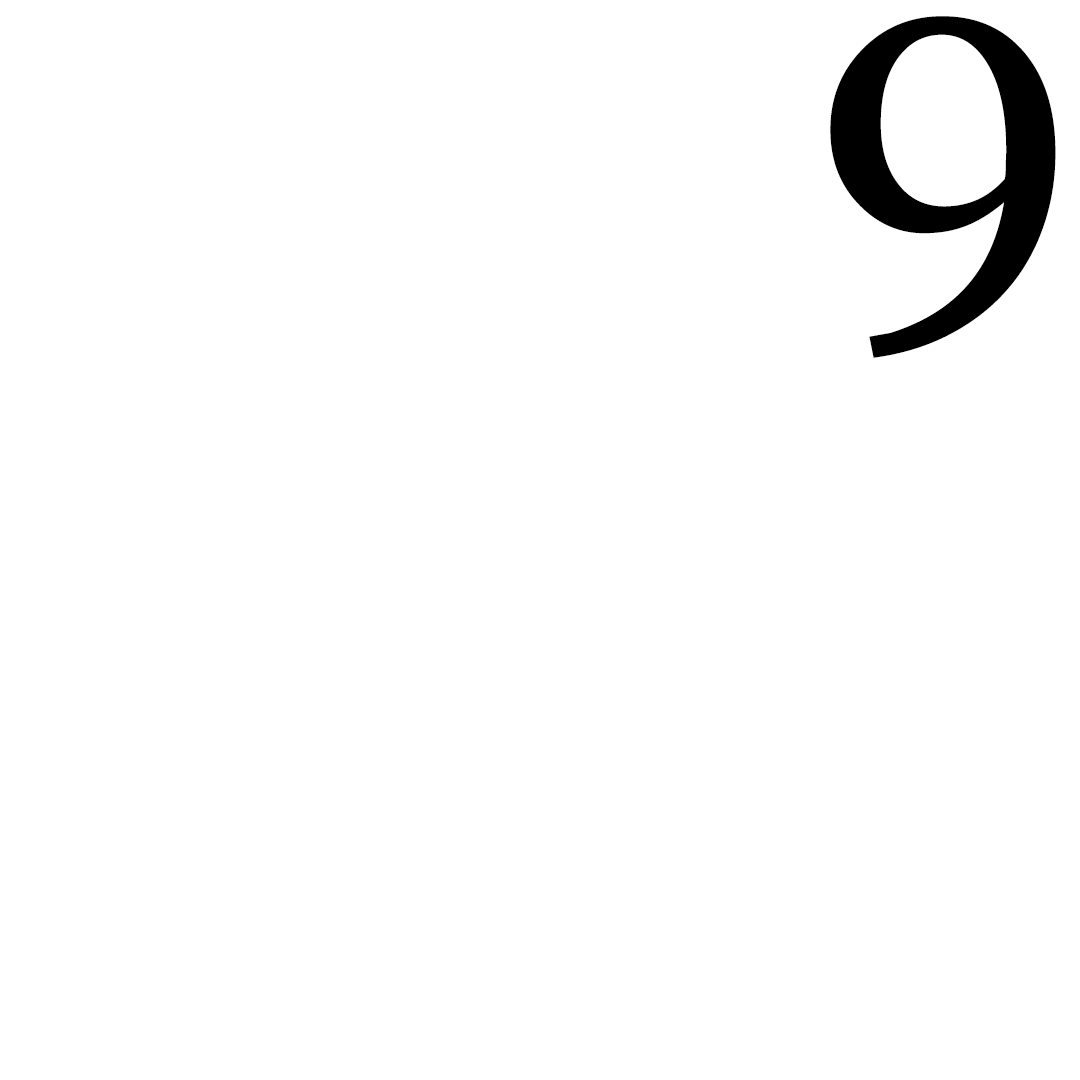
<style>
.page{position:relative;width:1080px;height:1080px;background:#ffffff}
.page>*{position:absolute;margin:0}
.t1{font:473.8px "Georgia";color:#000000}
</style>
<div class="page">
<p class="t1" style="left:830px;top:16px;width:226px;height:342px">9</p>
</div>
